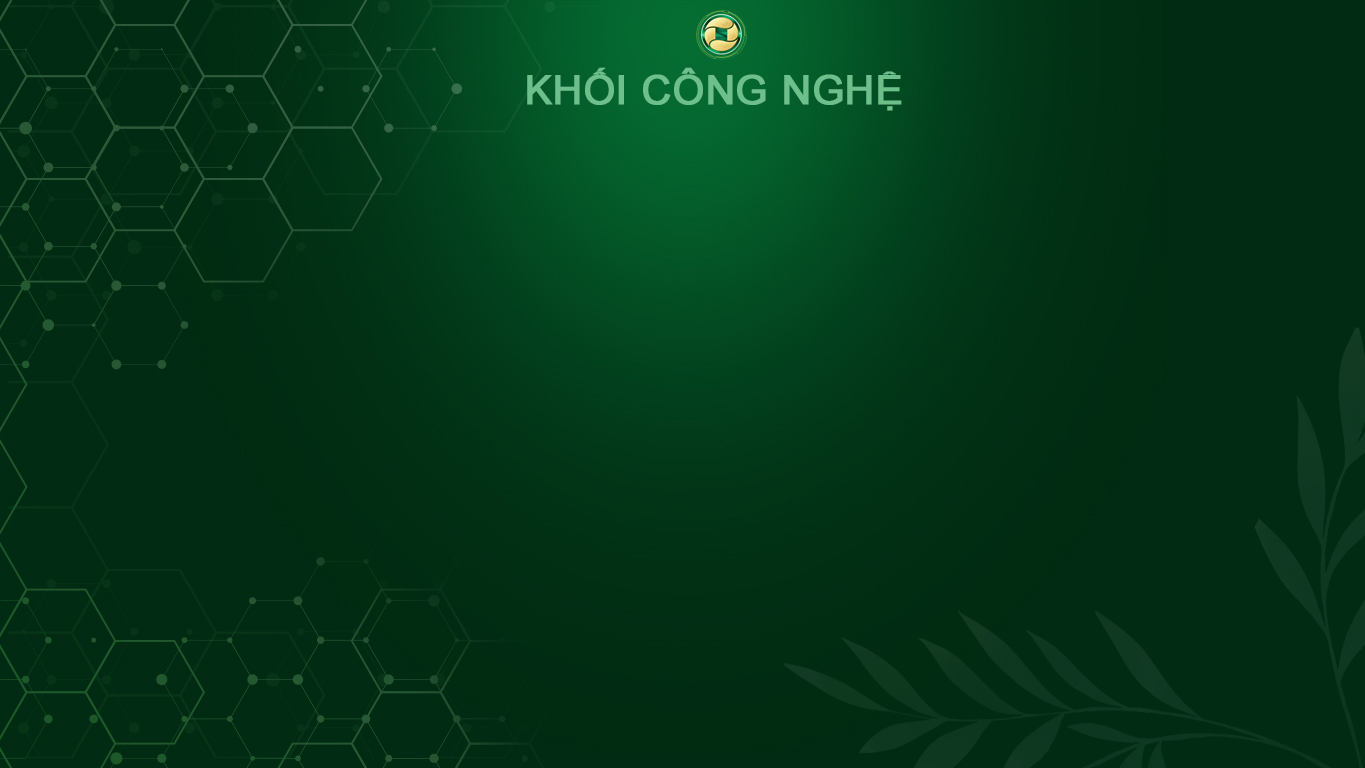
<style>
.page{position:relative;width:1365px;height:768px;background:#012b13}
.page>*{position:absolute;margin:0}
.t1{font:19.4px "ArialMT";color:#6dbf8c;text-transform:uppercase;font-weight:bold}
</style>
<div class="page">
<p class="t1" style="left:527px;top:67px;width:375px;height:44px">khối công nghệ</p>
</div>
